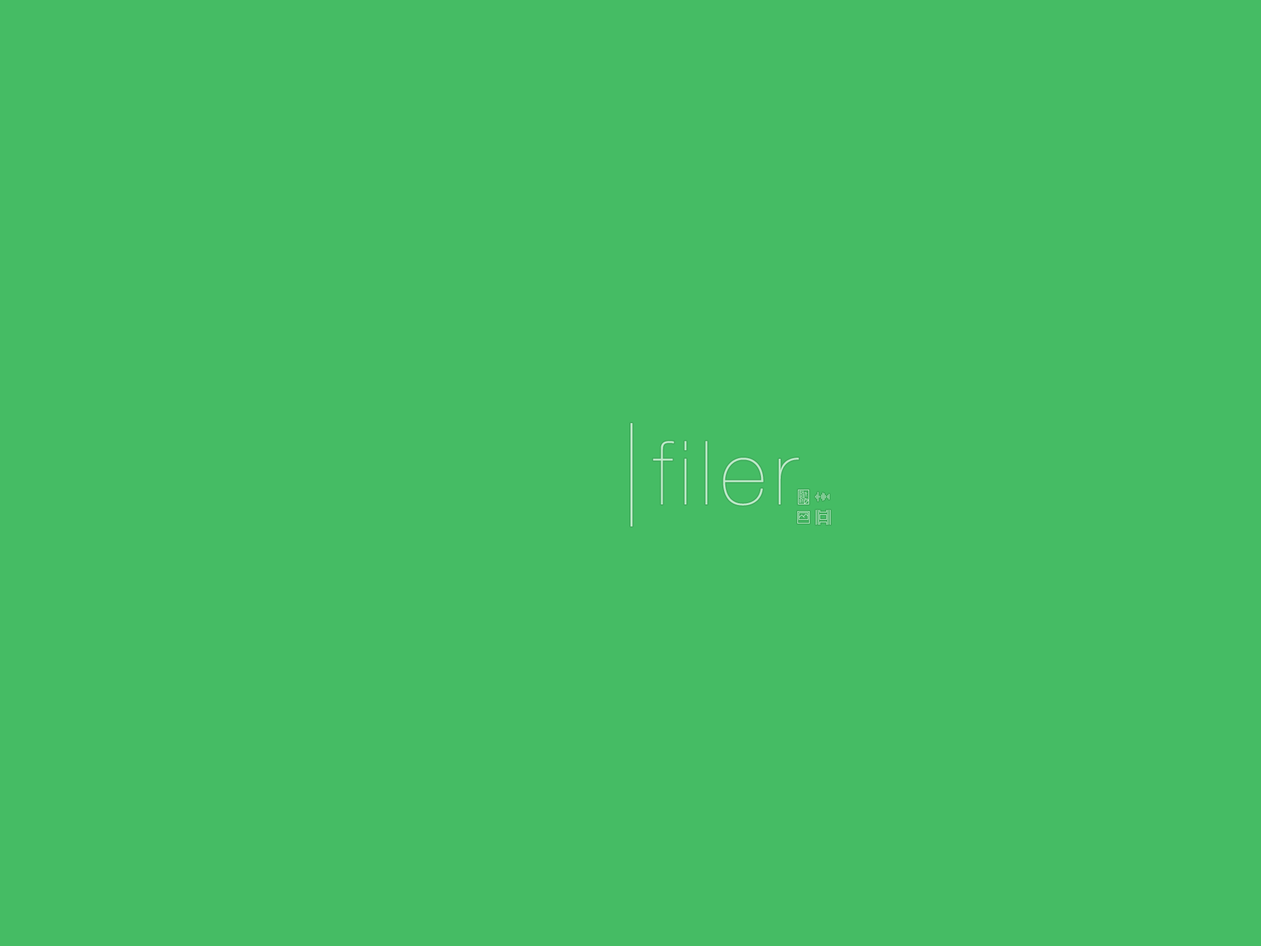
<style>
.page{position:relative;width:1261px;height:946px;background:#45bc64}
.page>*{position:absolute;margin:0}
.t1{font:88.7px "HelveticaNeue-UltraLight";letter-spacing:0.1em;color:#c0e8ca}
.t2{font:103.4px "HelveticaNeue-UltraLight";letter-spacing:0.1em;color:#c0e8ca}
</style>
<div class="page">
<p class="t1" style="left:630px;top:423px;width:169px;height:103px"><span class="t2">|</span>filer</p>
</div>
